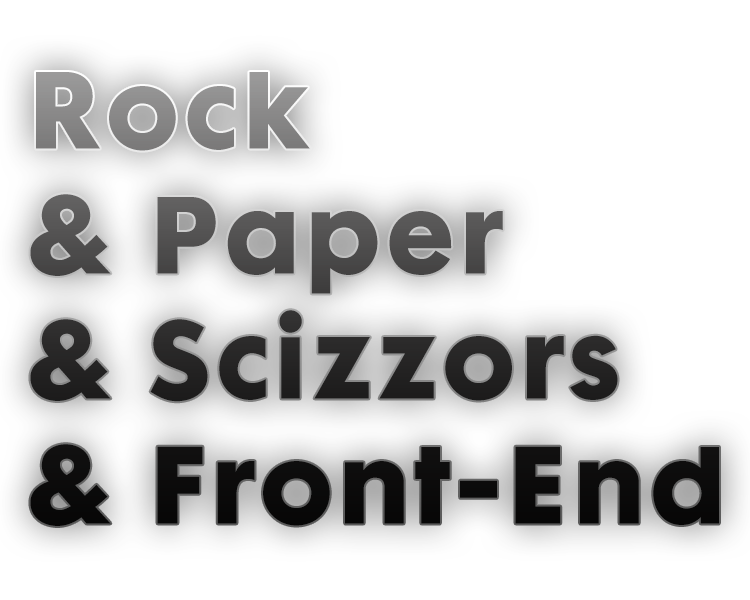
<style>
.page{position:relative;width:750px;height:600px;background:#ffffff}
.page>*{position:absolute;margin:0}
.t1{font:100px/125px "FuturaMaxiCGBold";letter-spacing:0.05em}
</style>
<div class="page">
<p class="t1" style="left:30px;top:72px;width:689px;height:454px">Rock<br>&amp; Paper<br>&amp; Scizzors<br>&amp; Front-End</p>
</div>
